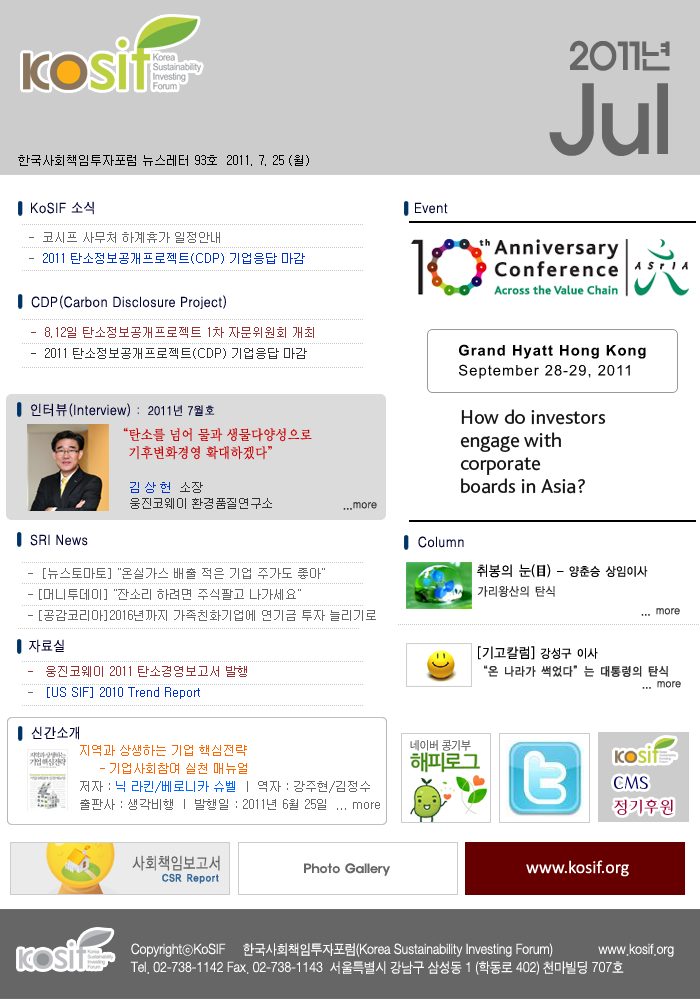
<style>
.page{position:relative;width:700px;height:1003px;background:#ffffff}
.page>*{position:absolute;margin:0}
.t1{font:36.1px/41.9px "ExpoM-HM";color:#666666;scale:0.89 1}
.t2{font:90.2px/41.9px "ExpoM-HM";color:#666666;scale:0.89 1}
.t3{font:12px "Gulim";color:#000000}
.t4{font:14px "H2gtrM";color:#000033;scale:0.9 1}
.t5{font:12px "Gulim";color:#0033cc}
.t6{font:12px "Gulim";color:#666666}
.t7{font:12px "Gulim";color:#993333}
.t8{font:12px "Gulim";color:#333333}
.t9{font:12px "H2gtrM";color:#000033;scale:0.9 1}
.t10{font:14px/18px "Ymjo420";letter-spacing:-0.025em;color:#cc0000;scale:0.9 1}
.t11{font:14px/12px "Ymjo420";letter-spacing:-0.025em;color:#cc0000;scale:0.9 1}
.t12{font:12px/16px "Gulim";letter-spacing:-0.025em;color:#333333}
.t13{font:12px/16px "Gulim";letter-spacing:-0.025em;color:#0033cc}
.t14{font:12px "YDIYGO120-KSCpc-EUC-H";letter-spacing:-0.025em;color:#333333;scale:0.9 1}
.t15{font:12px "YDIYGO120-KSCpc-EUC-H";letter-spacing:-0.025em;color:#000000;scale:0.9 1}
.t16{font:14px "YDIYGO120-KSCpc-EUC-H";letter-spacing:-0.025em;color:#000000;scale:0.9 1}
.t17{font:14px "YDIYMjO150";letter-spacing:-0.025em;color:#000000;scale:0.9 1}
.t18{font:12px "YDIYGO130-KSCpc-EUC-H";letter-spacing:-0.01em;color:#333333;scale:0.9 1}
.t19{font:12px/18px "Gulim";color:#666666}
.t20{font:12px/18px "Gulim";color:#ff6600}
.t21{font:12px/18px "Gulim";color:#0066ff}
.t22{font:12px "ExpoM-HM";color:#666666}
.t23{font:18px "Calibri";color:#ffffff}
.t24{font:14px/18px "SandJg";color:#ffffff;scale:0.9 1}
</style>
<div class="page">
<p class="t1" style="left:549px;top:40px;width:121px;height:116px;text-align:right">2011년<br><span class="t2">Jul</span></p>
<p class="t3" style="left:18px;top:155px;width:291px;height:11px">한국사회책임투자포럼 뉴스레터 93호  2011. 7. 25 (월)</p>
<p class="t4" style="left:31px;top:201px;width:63px;height:14px">KoSIF 소식</p>
<p class="t4" style="left:415px;top:202px;width:33px;height:12px">Event</p>
<p class="t5" style="left:29px;top:232px;width:276px;height:32px"><span class="t6">-  코시프 사무처 하계휴가 일정안내<br>-  </span>2011 탄소정보공개프로젝트(CDP) 기업응답 마감</p>
<p class="t4" style="left:31px;top:295px;width:195px;height:14px">CDP(Carbon Disclosure Project)</p>
<p class="t7" style="left:31px;top:327px;width:283px;height:32px">-  8.12일 탄소정보공개프로젝트 1차 자문위원회 개최 <br><span class="t8">-  2011 탄소정보공개프로젝트(CDP) 기업응답 마감</span></p>
<p class="t4" style="left:31px;top:403px;width:184px;height:14px">인터뷰(Interview) <span class="t9">:  2011년 7월호</span></p>
<p class="t10" style="left:123px;top:427px;width:189px;height:33px"><span class="t11">“탄소를 넘어 물과 생</span>물다양성으로 <br>   기후변화경영 확대<span class="t11">하겠다”</span></p>
<p class="t12" style="left:130px;top:482px;width:142px;height:27px"><span class="t13">김 상 헌  </span>소장 <br>웅진코웨이 환경품질연구소</p>
<p class="t14" style="left:343px;top:502px;width:34px;height:8px">...more</p>
<p class="t4" style="left:30px;top:534px;width:58px;height:12px">SRI News</p>
<p class="t4" style="left:418px;top:536px;width:46px;height:12px">Column</p>
<p class="t6" style="left:28px;top:568px;width:348px;height:53px">-  [뉴스토마토] "온실가스 배출 적은 기업 주가도 좋아"  <br>- [머니투데이] "잔소리 하려면 주식팔고 나가세요"  <br>- [공감코리아]2016년까지 가족친화기업에 연기금 투자 늘리기로</p>
<p class="t15" style="left:477px;top:564px;width:171px;height:14px"><span class="t16">취봉의 눈(</span><span class="t17">目</span><span class="t16">) </span>- 양춘승 상임이사</p>
<p class="t14" style="left:477px;top:586px;width:78px;height:11px">가리왕산의 탄식</p>
<p class="t14" style="left:641px;top:608px;width:39px;height:8px">... more</p>
<p class="t4" style="left:29px;top:639px;width:35px;height:14px">자료실</p>
<p class="t16" style="left:478px;top:646px;width:120px;height:14px">[기고칼럼]<span class="t15"> 강성구 이사</span></p>
<p class="t18" style="left:484px;top:665px;width:184px;height:12px">“온 나라가 썩었다”는 대통령의 탄식</p>
<p class="t5" style="left:28px;top:666px;width:219px;height:33px"><span class="t7">-   웅진코웨이 2011 탄소경영보고서 발행<br></span><span class="t6">-   </span>[US SIF] 2010 Trend Report</p>
<p class="t14" style="left:642px;top:681px;width:39px;height:8px">... more</p>
<p class="t4" style="left:31px;top:726px;width:49px;height:14px">신간소개</p>
<p class="t19" style="left:80px;top:745px;width:300px;height:65px"><span class="t20">지역과 상생하는 기업 핵심전략 <br>     - 기업사회참여 실천 매뉴얼<br></span>저자 : <span class="t21">닉 라킨/베로니카 슈벨</span> ㅣ 역자 : 강주현/김정수<br>출판사 : 생각비행  l  발행일 : 2011년 6월 25일  ... more</p>
<p class="t22" style="left:304px;top:863px;width:86px;height:13px">Photo Gallery</p>
<p class="t23" style="left:526px;top:860px;width:103px;height:17px">www.kosif.org</p>
<p class="t24" style="left:130px;top:943px;width:544px;height:32px">CopyrightⓒKoSIF     한국사회책임투자포럼(Korea Sustainability Investing Forum)             www.kosif.org <br>Tel. 02-738-1142 Fax. 02-738-1143  서울특별시 강남구 삼성동 1 (학동로 402) 천마빌딩 707호</p>
</div>
